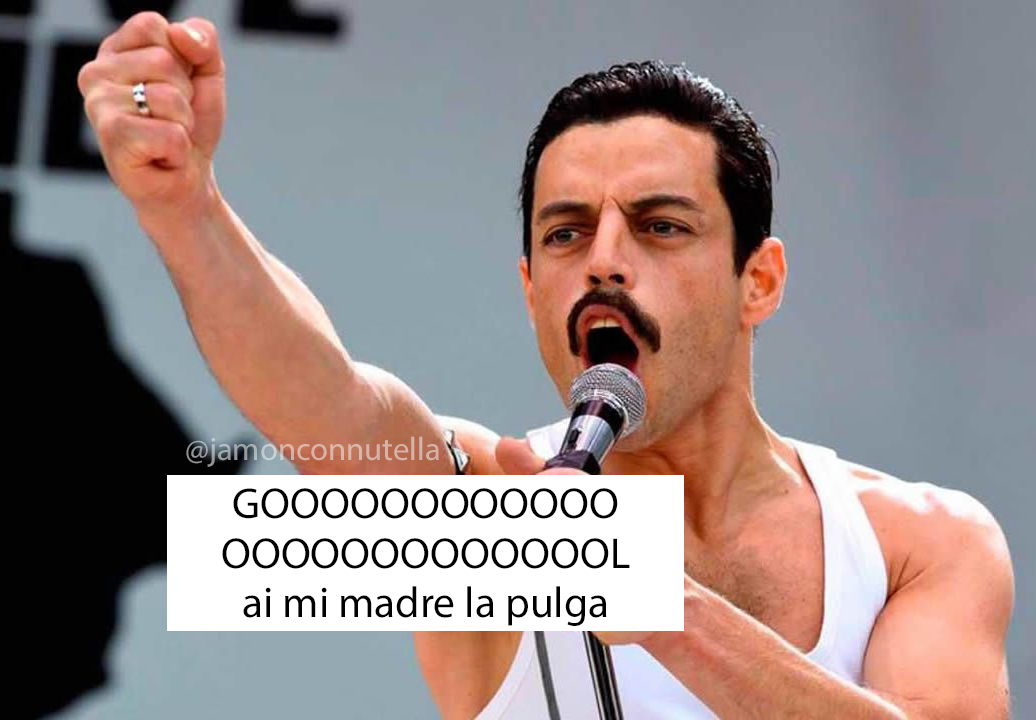
<style>
.page{position:relative;width:1036px;height:720px}
.page>*{position:absolute;margin:0}
.t1{font:32.7px "MyriadPro-Regular"}
.t2{font:43.4px "MyriadPro-Regular";color:#000000}
</style>
<div class="page">
<p class="t1" style="left:186px;top:436px;width:253px;height:31px">@jamonconnutella</p>
<p class="t2" style="left:222px;top:488px;width:408px;height:138px;text-align:center">GOOOOOOOOOOOO<br>OOOOOOOOOOOOOL<br>ai mi madre la pulga</p>
</div>
